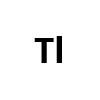
<style>
.page{position:relative;width:100px;height:100px;background:#ffffff}
.page>*{position:absolute;margin:0}
.t1{font:35px "OpenSans-Bold";color:#000000}
</style>
<div class="page">
<p class="t1" style="left:34px;top:36px;width:28px;height:27px">Tl</p>
</div>
